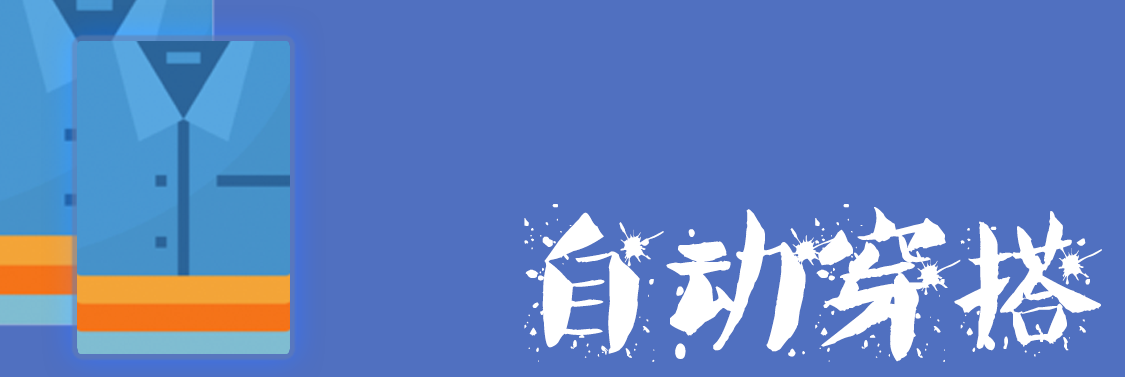
<style>
.page{position:relative;width:1125px;height:377px;background:#5070c0}
.page>*{position:absolute;margin:0}
.t1{font:150px "yegenyoufont";letter-spacing:-0.003em;color:#ffffff}
</style>
<div class="page">
<p class="t1" style="left:524px;top:204px;width:578px;height:158px">自动穿搭</p>
</div>
